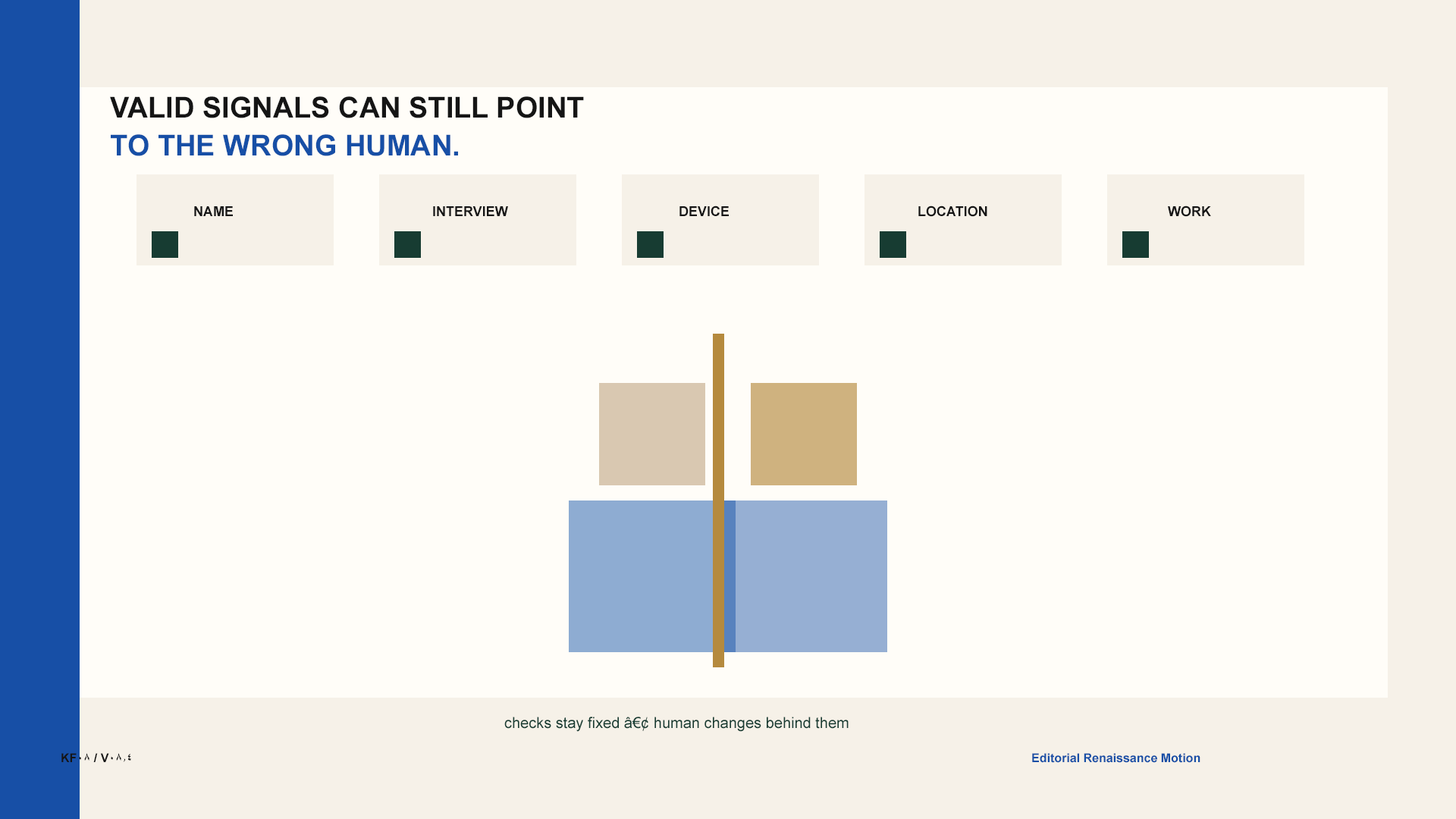
<style>
.page{position:relative;width:1456px;height:819px;background:#fffdf8}
.page>*{position:absolute;margin:0}
.t1{font:28.8px "Arial-BoldMT";color:#151515}
.t2{font:28.8px "Arial-BoldMT";color:#174fa6}
.t3{font:13.6px "Arial-BoldMT";color:#151515}
.t4{font:15.2px "ArialMT";color:#173c32}
.t5{font:12.1px "Arial-BoldMT";color:#151515}
.t6{font:12.1px "Arial-BoldMT";color:#174fa6}
</style>
<div class="page">
<p class="t1" style="left:110px;top:96px;width:474px;height:22px">VALID SIGNALS CAN STILL POINT</p>
<p class="t2" style="left:111px;top:134px;width:347px;height:22px">TO THE WRONG HUMAN.</p>
<p class="t3" style="left:194px;top:206px;width:39px;height:10px">NAME</p>
<p class="t3" style="left:433px;top:206px;width:75px;height:10px">INTERVIEW</p>
<p class="t3" style="left:679px;top:206px;width:50px;height:10px">DEVICE</p>
<p class="t3" style="left:918px;top:206px;width:69px;height:11px">LOCATION</p>
<p class="t3" style="left:1168px;top:206px;width:43px;height:11px">WORK</p>
<p class="t4" style="left:504px;top:717px;width:345px;height:15px">checks stay fixed â€¢ human changes behind them</p>
<p class="t5" style="left:61px;top:753px;width:70px;height:9px">KF08 / V08.4</p>
<p class="t6" style="left:1032px;top:753px;width:168px;height:10px">Editorial Renaissance Motion</p>
</div>
